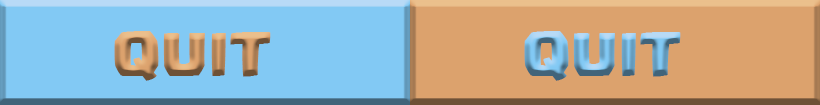
<style>
.page{position:relative;width:820px;height:105px;background:#dca26d}
.page>*{position:absolute;margin:0}
.t1{font:48px "Supercell-Magic"}
</style>
<div class="page">
<p class="t1" style="left:114px;top:31px;width:157px;height:50px">QUIT</p>
<p class="t1" style="left:524px;top:31px;width:157px;height:50px">QUIT</p>
</div>
